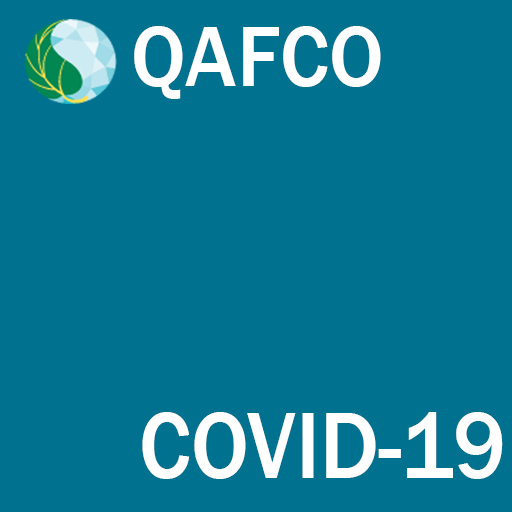
<style>
.page{position:relative;width:512px;height:512px;background:#00718f}
.page>*{position:absolute;margin:0}
.t1{font:89.4px "FranklinGothic-Medium";color:#ffffff;scale:0.95 1}
.t2{font:98.2px "FranklinGothic-Medium";color:#ffffff;scale:0.92 1}
</style>
<div class="page">
<p class="t1" style="left:134px;top:26px;width:247px;height:73px">QAFCO</p>
<p class="t2" style="left:142px;top:412px;width:361px;height:67px">COVID-19</p>
</div>
